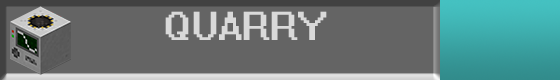
<style>
.page{position:relative;width:560px;height:80px;background:#646464}
.page>*{position:absolute;margin:0}
.t1{font:36px "System";color:#d9d9d9}
</style>
<div class="page">
<p class="t1" style="left:165px;top:11px;width:162px;height:29px">QUARRY</p>
</div>
